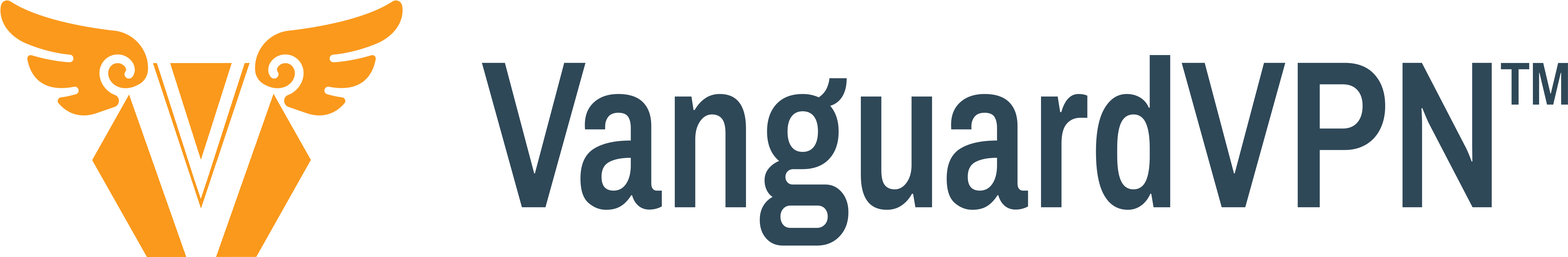
<style>
.page{position:relative;width:1568px;height:257px;background:#ffffff}
.page>*{position:absolute;margin:0}
.t1{font:210.4px "ArchivoNarrow-SemiBold";color:#2f4858;scale:0.91 1}
.t2{font:103.1px "ArchivoNarrow-SemiBold";color:#2f4858}
</style>
<div class="page">
<p class="t1" style="left:482px;top:55px;width:1010px;height:191px">VanguardVPN</p>
<p class="t2" style="left:1501px;top:63px;width:67px;height:42px">™</p>
</div>
